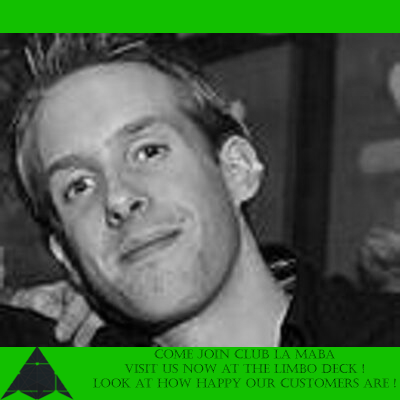
<style>
.page{position:relative;width:400px;height:400px}
.page>*{position:absolute;margin:0}
.t1{font:12.1px "Castellar"}
</style>
<div class="page">
<p class="t1" style="left:93px;top:349px;width:303px;height:39px;text-align:center">Come Join Club la maba<br>Visit us now at the limbo deck !<br>Look at how happy our customers are !</p>
</div>
